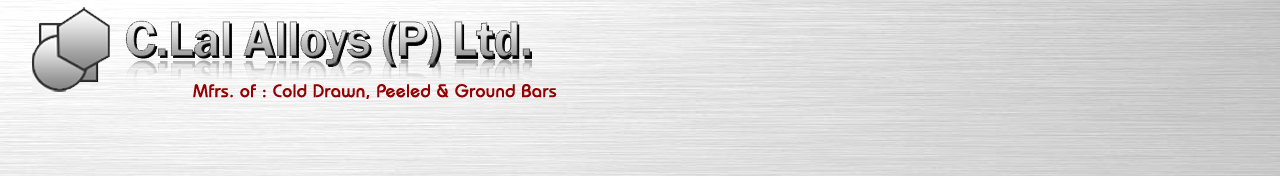
<style>
.page{position:relative;width:1280px;height:176px}
.page>*{position:absolute;margin:0}
.t1{font:18px "BauhausITCbyBT-Medium";color:#930202;font-weight:bold}
</style>
<div class="page">
<p class="t1" style="left:193px;top:84px;width:364px;height:15px">Mfrs. of : Cold Drawn, Peeled &amp; Ground Bars</p>
</div>
